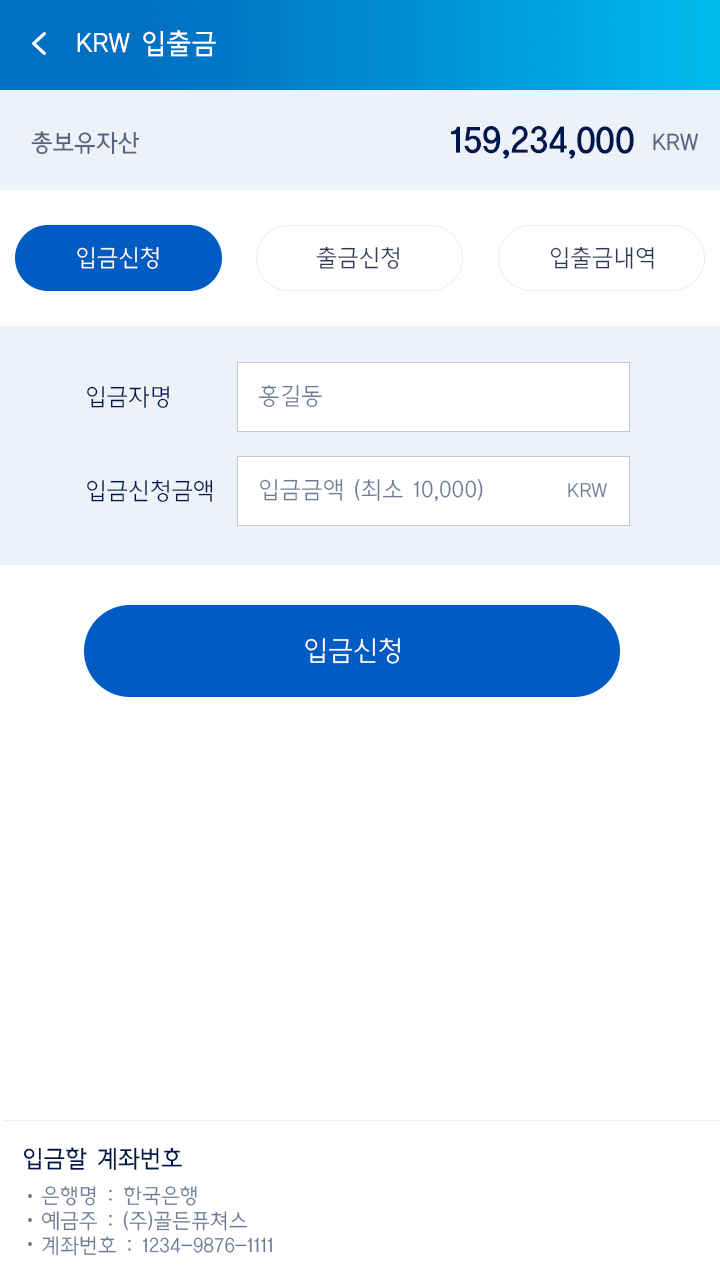
<style>
.page{position:relative;width:720px;height:1280px;background:#ffffff}
.page>*{position:absolute;margin:0}
.t1{font:28px "CreGoM";color:#ffffff}
.t2{font:36px "CreGoB";color:#00164f}
.t3{font:24px "CreGoM";color:#586481}
.t4{font:24px "CreGoL";color:#2f3b56}
.t5{font:24px "CreGoL";color:#ffffff}
.t6{font:24px "CreGoL";color:#00164f}
.t7{font:24px "CreGoL";color:#6f7a94}
.t8{font:21px "CreGoL";color:#6f7a94}
.t9{font:28px "CreGoL";color:#ffffff}
.t10{font:24px "CreGoM";color:#00164f}
</style>
<div class="page">
<p class="t1" style="left:77px;top:30px;width:139px;height:27px">KRW 입출금</p>
<p class="t2" style="left:451px;top:126px;width:183px;height:33px">159,234,000</p>
<p class="t3" style="left:31px;top:131px;width:109px;height:24px">총보유자산</p>
<p class="t3" style="left:653px;top:133px;width:45px;height:18px">KRW</p>
<p class="t4" style="left:316px;top:246px;width:83px;height:23px">출금신청</p>
<p class="t4" style="left:550px;top:246px;width:104px;height:23px">입출금내역</p>
<p class="t5" style="left:77px;top:247px;width:82px;height:22px">입금신청</p>
<p class="t6" style="left:87px;top:386px;width:82px;height:22px">입금자명</p>
<p class="t7" style="left:258px;top:385px;width:64px;height:22px">홍길동</p>
<p class="t6" style="left:87px;top:480px;width:126px;height:22px">입금신청금액</p>
<p class="t7" style="left:260px;top:478px;width:223px;height:23px">입금금액 (최소 10,000)</p>
<p class="t8" style="left:568px;top:483px;width:39px;height:15px">KRW</p>
<p class="t9" style="left:305px;top:638px;width:95px;height:26px">입금신청</p>
<p class="t10" style="left:23px;top:1147px;width:159px;height:24px">입금할 계좌번호</p>
<p class="t8" style="left:41px;top:1186px;width:231px;height:70px">은행명 : 한국은행<br>예금주 : (주)골든퓨쳐스<br>계좌번호 : 1234-9876-1111</p>
</div>
